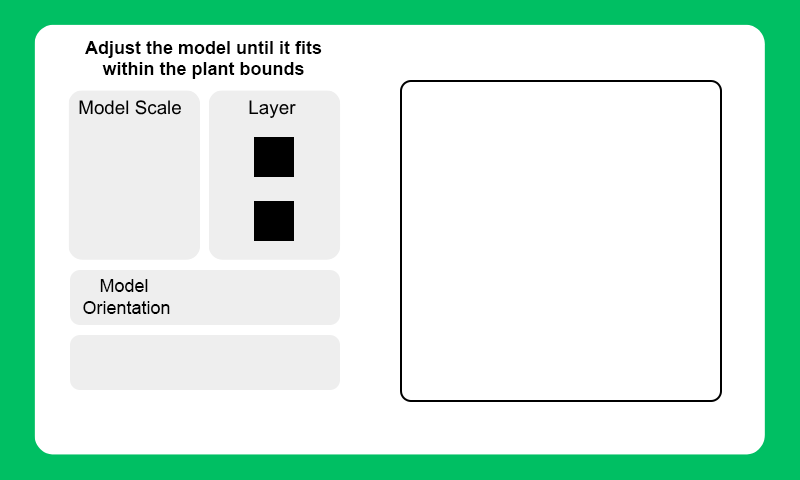
<style>
.page{position:relative;width:800px;height:480px;background:#ffffff}
.page>*{position:absolute;margin:0}
.t1{font:18px "Arial-BoldMT";color:#000000}
.t2{font:18px "ArialMT";color:#000000}
</style>
<div class="page">
<p class="t1" style="left:85px;top:41px;width:237px;height:38px;text-align:center">Adjust the model until it fits within the plant bounds</p>
<p class="t2" style="left:83px;top:279px;width:87px;height:35px;text-align:center">Model <br>Orientation</p>
</div>
